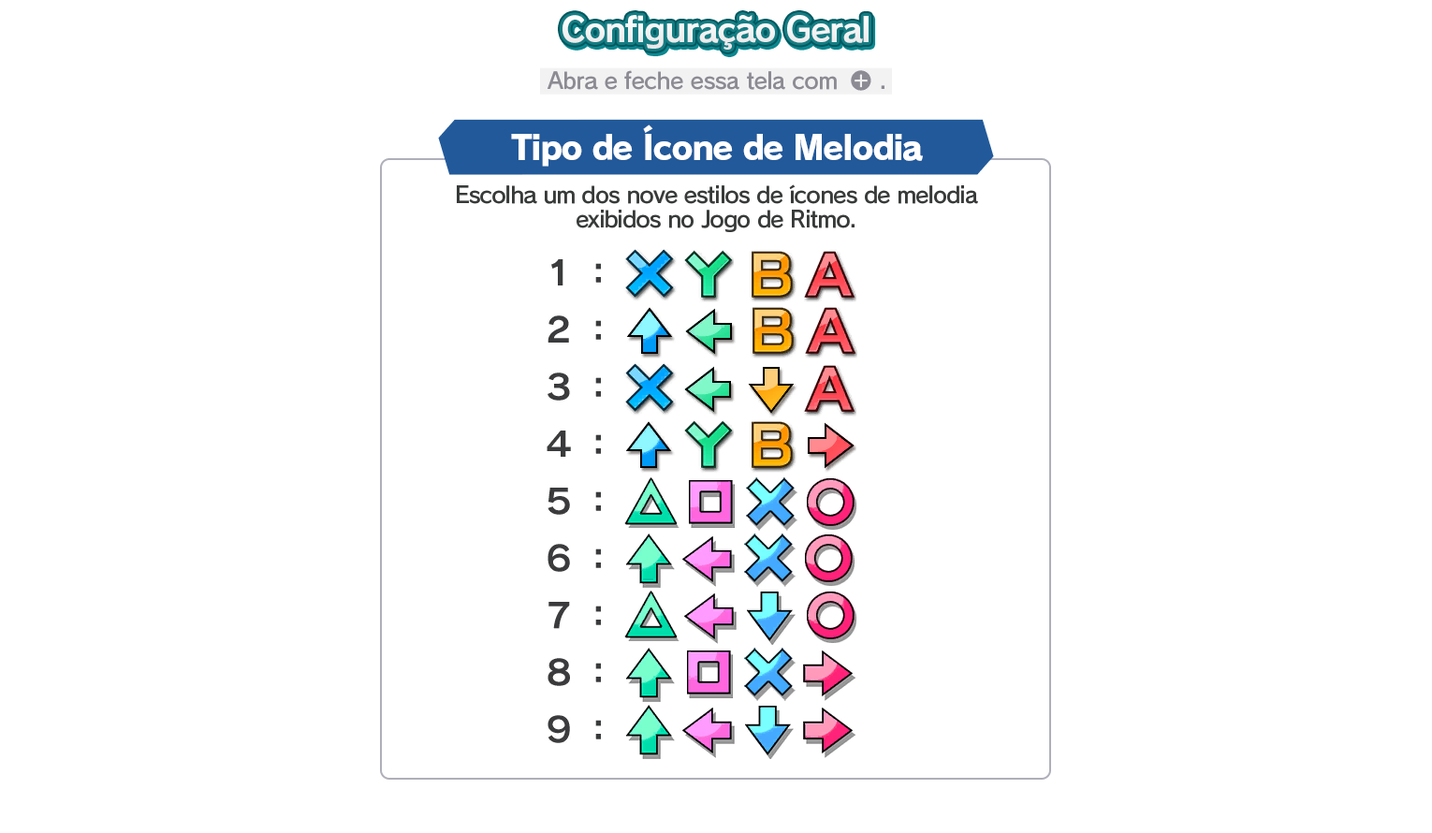
<style>
.page{position:relative;width:1432px;height:833px;background:#ffffff}
.page>*{position:absolute;margin:0}
.t1{font:33.7px "RodinPro-B";letter-spacing:-0.039em;color:#f2f3f3}
.t2{font:22.5px "RodinPro-DB";letter-spacing:-0.025em;color:#8c8b93}
.t3{font:33.7px "RodinPro-EB";letter-spacing:-0.048em;color:#ffffff}
.t4{font:22.5px/23.7px "RodinPro-DB";letter-spacing:-0.04em;color:#383a3a}
</style>
<div class="page">
<p class="t1" style="left:562px;top:15px;width:306px;height:35px">Configuração Geral</p>
<p class="t2" style="left:547px;top:70px;width:290px;height:20px">Abra e feche essa tela com</p>
<p class="t2" style="left:881px;top:85px;width:3px;height:4px">.</p>
<p class="t3" style="left:511px;top:124px;width:412px;height:43px">Tipo de Ícone de Melodia</p>
<p class="t4" style="left:457px;top:184px;width:521px;height:48px;text-align:center">Escolha um dos nove estilos de ícones de melodia<br>exibidos no Jogo de Ritmo.</p>
</div>
